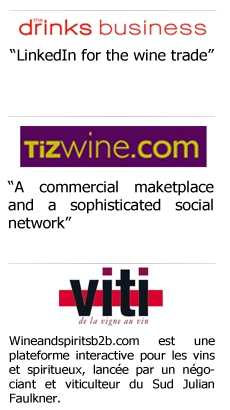
<style>
.page{position:relative;width:230px;height:410px;background:#ffffff}
.page>*{position:absolute;margin:0}
.t1{font:15px "Tahoma";color:#000000;scale:1.06 1}
.t2{font:12px "Tahoma";color:#000000;scale:1.06 1}
</style>
<div class="page">
<p class="t1" style="left:9px;top:49px;width:206px;height:12px">“LinkedIn for the wine trade”</p>
<p class="t1" style="left:7px;top:180px;width:207px;height:49px;text-align:justify">“A commercial maketplace and a sophisticated social network”</p>
<p class="t2" style="left:9px;top:336px;width:206px;height:67px;text-align:justify">Wineandspiritsb2b.com est une plateforme interactive pour les vins et spiritueux, lancée par un négociant et viticulteur du Sud Julian Faulkner.</p>
</div>
